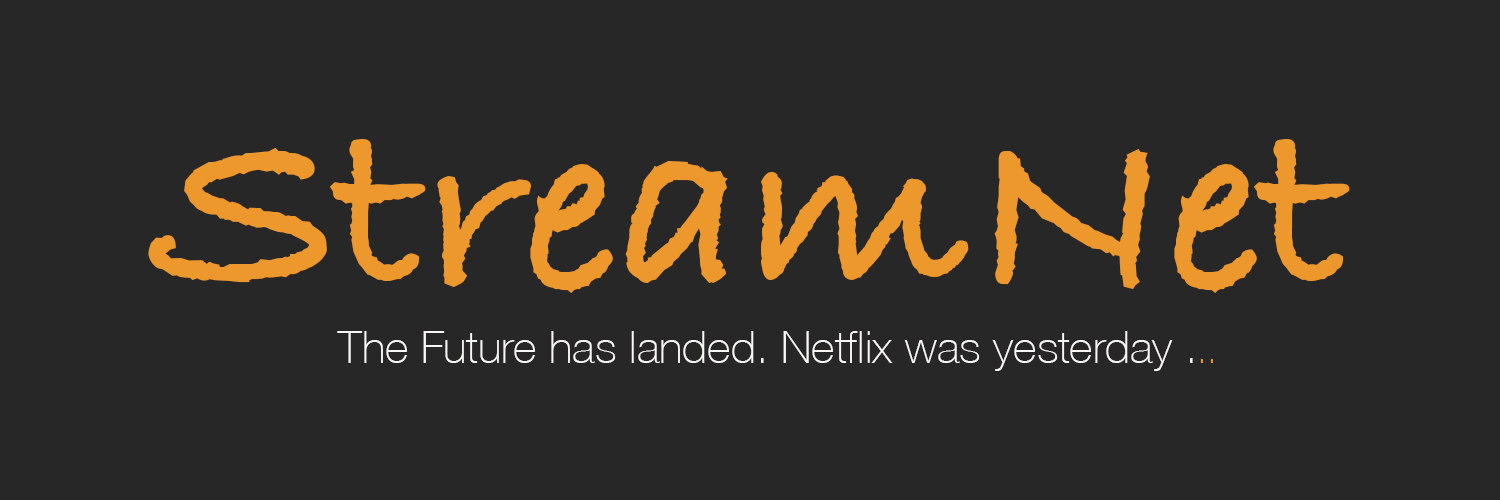
<style>
.page{position:relative;width:1500px;height:500px;background:#272727}
.page>*{position:absolute;margin:0}
.t1{font:250px "BradleyHandITCTT-Bold";color:#ec982c}
.t2{font:45px "HelveticaNeue-Thin";color:#f9f6f3}
.t3{font:36px "HelveticaNeue-Thin";color:#ec982c}
</style>
<div class="page">
<p class="t1" style="left:148px;top:139px;width:1202px;height:154px">StreamNet</p>
<p class="t2" style="left:337px;top:331px;width:876px;height:40px">The Future has landed. Netflix was yesterday .<span class="t3">..</span></p>
</div>
